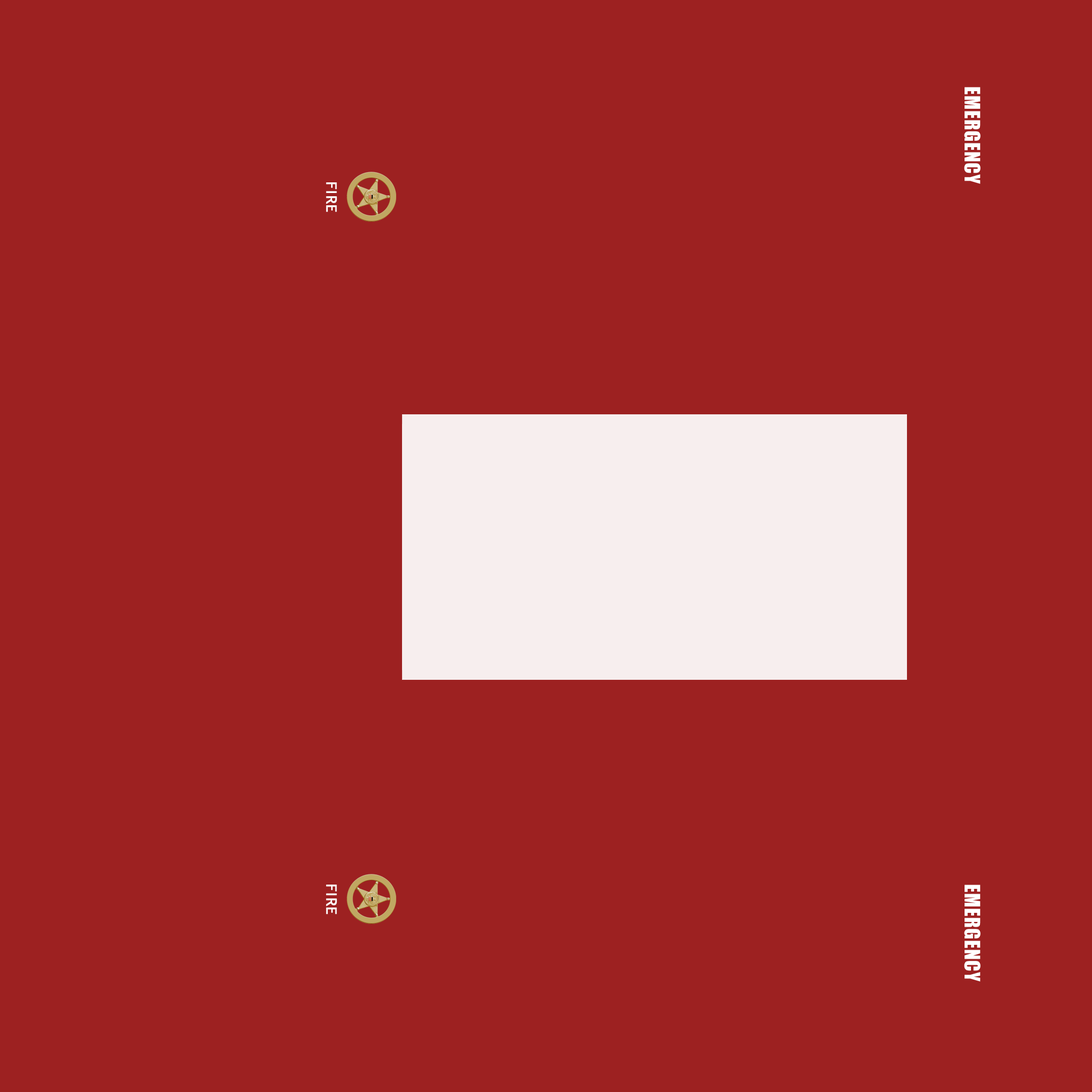
<style>
.page{position:relative;width:1092px;height:1092px;background:#9d2121}
.page>*{position:absolute;margin:0}
.t1{font:19.7px "Impact";letter-spacing:0.04em;color:#ffffff}
.t2{font:14.4px "TrebuchetMS";letter-spacing:0.04em;color:#ffffff;font-weight:bold}
</style>
<div class="page">
<p class="t1" style="left:964px;top:87px;width:17px;height:97px;rotate:90deg">EMERGENCY</p>
<p class="t2" style="left:326px;top:182px;width:11px;height:30px;rotate:90deg">FIRE</p>
<p class="t2" style="left:326px;top:885px;width:11px;height:29px;rotate:90deg">FIRE</p>
<p class="t1" style="left:964px;top:885px;width:17px;height:97px;rotate:90deg">EMERGENCY</p>
</div>
